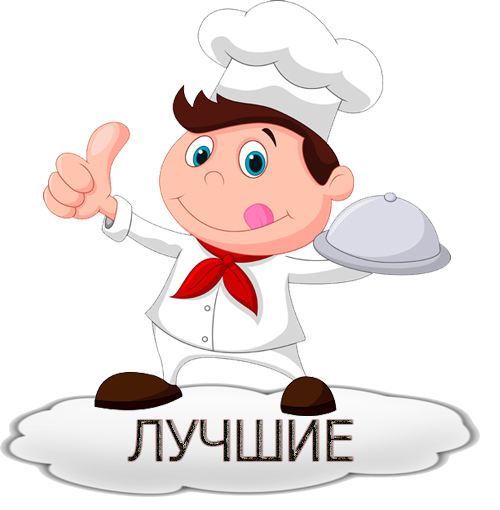
<style>
.page{position:relative;width:500px;height:510px;background:#ffffff}
.page>*{position:absolute;margin:0}
.t1{font:55.6px "Tahoma"}
</style>
<div class="page">
<p class="t1" style="left:128px;top:420px;width:225px;height:41px">ЛУЧШИЕ</p>
</div>
